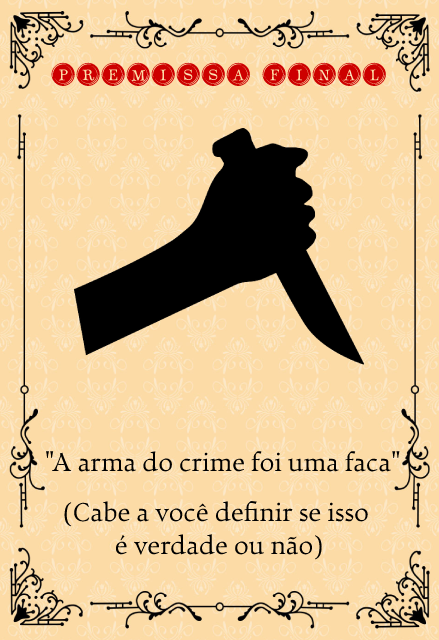
<style>
.page{position:relative;width:439px;height:640px;background:#fcdba6}
.page>*{position:absolute;margin:0}
.t1{font:30.9px "TypeKeysFilled";color:#cd0000}
.t2{font:28px "Walleye";color:#000000}
</style>
<div class="page">
<p class="t1" style="left:51px;top:62px;width:335px;height:24px">Premissa final</p>
<p class="t2" style="left:46px;top:451px;width:354px;height:21px">"A arma do crime foi uma faca"</p>
<p class="t2" style="left:64px;top:500px;width:304px;height:60px;text-align:center">(Cabe a você definir se isso <br>é verdade ou não)</p>
</div>
